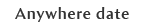
<style>
.page{position:relative;width:144px;height:28px;background:#ffffff}
.page>*{position:absolute;margin:0}
.t1{font:16px "AmiraParadiso";letter-spacing:0.05em;color:#333333}
</style>
<div class="page">
<p class="t1" style="left:15px;top:7px;width:114px;height:15px">Anywhere date</p>
</div>
